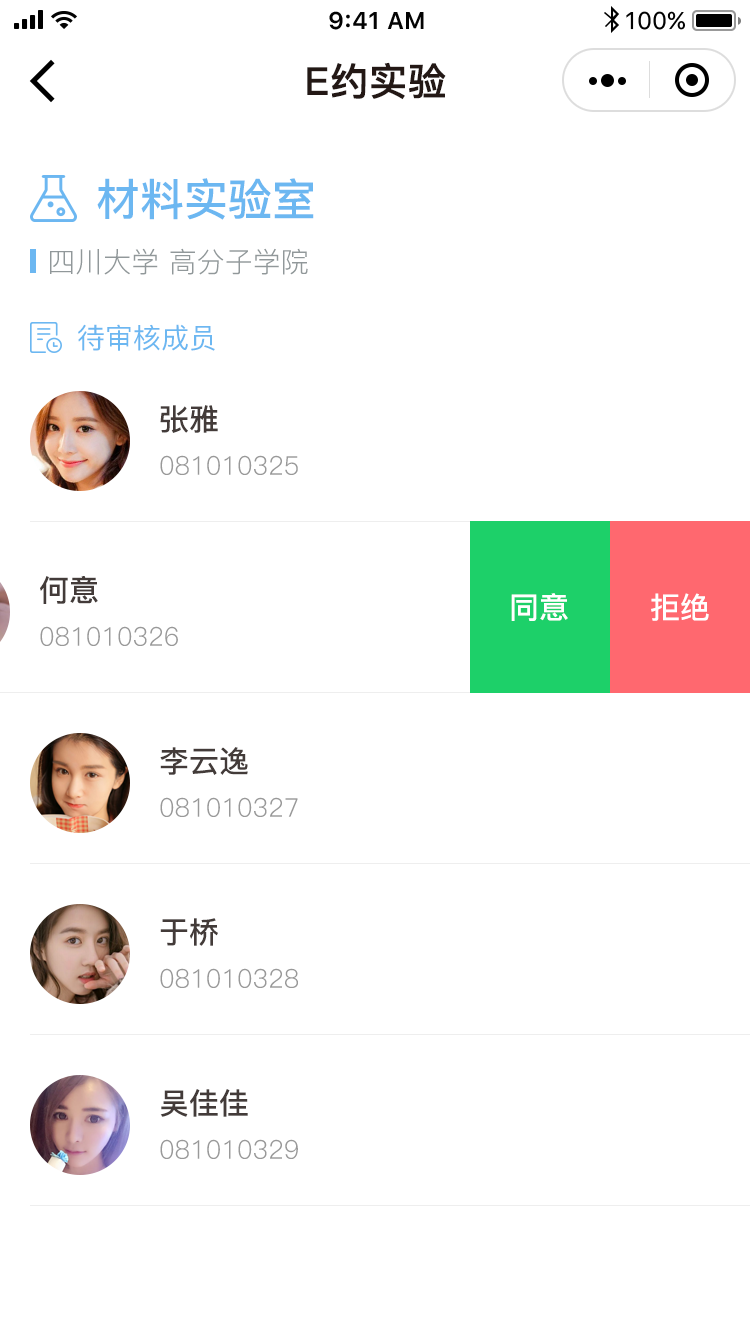
<style>
.page{position:relative;width:750px;height:1334px;background:#ffffff}
.page>*{position:absolute;margin:0}
.t1{font:38px "PingFang-SC-Bold";color:#231815;font-weight:bold}
.t2{font:44px "PingFang-SC-Bold";color:#6cb7f1}
.t3{font:28px "PingFang-SC-Regular";color:#91989a}
.t4{font:28px "PingFang-SC-Medium";color:#6cb7f1}
.t5{font:30px "PingFang-SC-Bold";color:#433b39}
.t6{font:26px "PingFang-SC-Regular";color:#999999}
.t7{font:30px "PingFang-SC-Bold";color:#ffffff}
</style>
<div class="page">
<p class="t1" style="left:307px;top:62px;width:139px;height:38px">E约实验</p>
<p class="t2" style="left:97px;top:178px;width:217px;height:42px">材料实验室</p>
<p class="t3" style="left:50px;top:248px;width:258px;height:27px">四川大学 高分子学院</p>
<p class="t4" style="left:78px;top:324px;width:137px;height:27px">待审核成员</p>
<p class="t5" style="left:160px;top:405px;width:58px;height:28px">张雅</p>
<p class="t6" style="left:160px;top:455px;width:138px;height:20px">081010325</p>
<p class="t5" style="left:40px;top:576px;width:58px;height:28px">何意</p>
<p class="t7" style="left:511px;top:593px;width:57px;height:28px">同意</p>
<p class="t7" style="left:651px;top:593px;width:58px;height:28px">拒绝</p>
<p class="t6" style="left:40px;top:626px;width:138px;height:20px">081010326</p>
<p class="t5" style="left:160px;top:747px;width:88px;height:28px">李云逸</p>
<p class="t6" style="left:160px;top:797px;width:138px;height:20px">081010327</p>
<p class="t5" style="left:160px;top:918px;width:58px;height:28px">于桥</p>
<p class="t6" style="left:160px;top:968px;width:138px;height:20px">081010328</p>
<p class="t5" style="left:160px;top:1089px;width:88px;height:28px">吴佳佳</p>
<p class="t6" style="left:160px;top:1139px;width:138px;height:20px">081010329</p>
</div>
